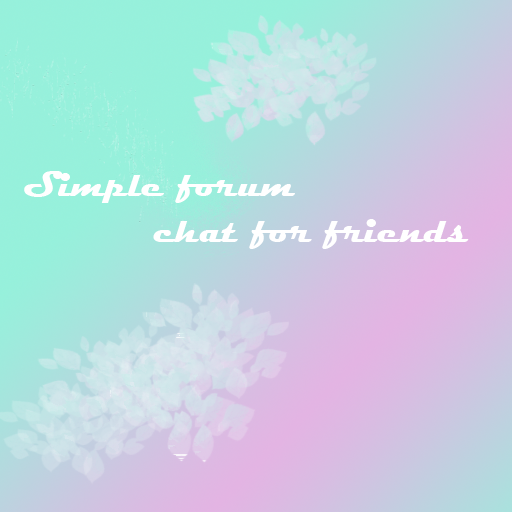
<style>
.page{position:relative;width:512px;height:512px}
.page>*{position:absolute;margin:0}
.t1{font:36px "Magneto-Bold";color:#ffffff}
</style>
<div class="page">
<p class="t1" style="left:24px;top:171px;width:271px;height:32px">Simple forum</p>
<p class="t1" style="left:153px;top:219px;width:316px;height:30px">chat for friends</p>
</div>
